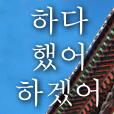
<style>
.page{position:relative;width:114px;height:114px}
.page>*{position:absolute;margin:0}
.t1{font:30px "AdobeMyungjoStd-Medium";color:#ffffff}
</style>
<div class="page">
<p class="t1" style="left:15px;top:6px;width:84px;height:101px;text-align:center">하다<br>했어<br>하겠어</p>
</div>
